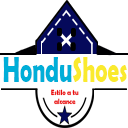
<style>
.page{position:relative;width:128px;height:128px;background:#ffffff}
.page>*{position:absolute;margin:0}
.t1{font:36.1px "BerlinSansFBDemi-Bold";color:#00aed8;scale:0.64 1}
.t2{font:36.1px "BerlinSansFBDemi-Bold";color:#faea2e;scale:0.64 1}
.t3{font:7.4px "BerlinSansFBDemi-Bold";color:#eb0b0b;scale:0.85 1}
</style>
<div class="page">
<p class="t1" style="left:3px;top:57px;width:124px;height:25px">Hondu<span class="t2">Shoes</span></p>
<p class="t3" style="left:51px;top:89px;width:28px;height:16px;text-align:center">Estilo a tu<br>alcance</p>
</div>
